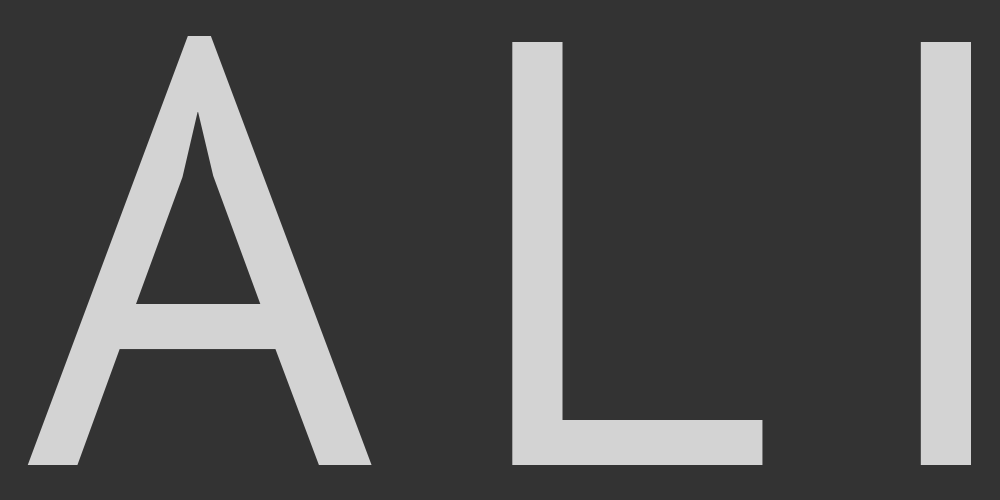
<style>
.page{position:relative;width:1000px;height:500px;background:#333333}
.page>*{position:absolute;margin:0}
.t1{font:604.2px "PTSans-Regular";letter-spacing:0.14em;color:#d3d3d3}
</style>
<div class="page">
<p class="t1" style="left:27px;top:36px;width:944px;height:429px">ALI</p>
</div>
